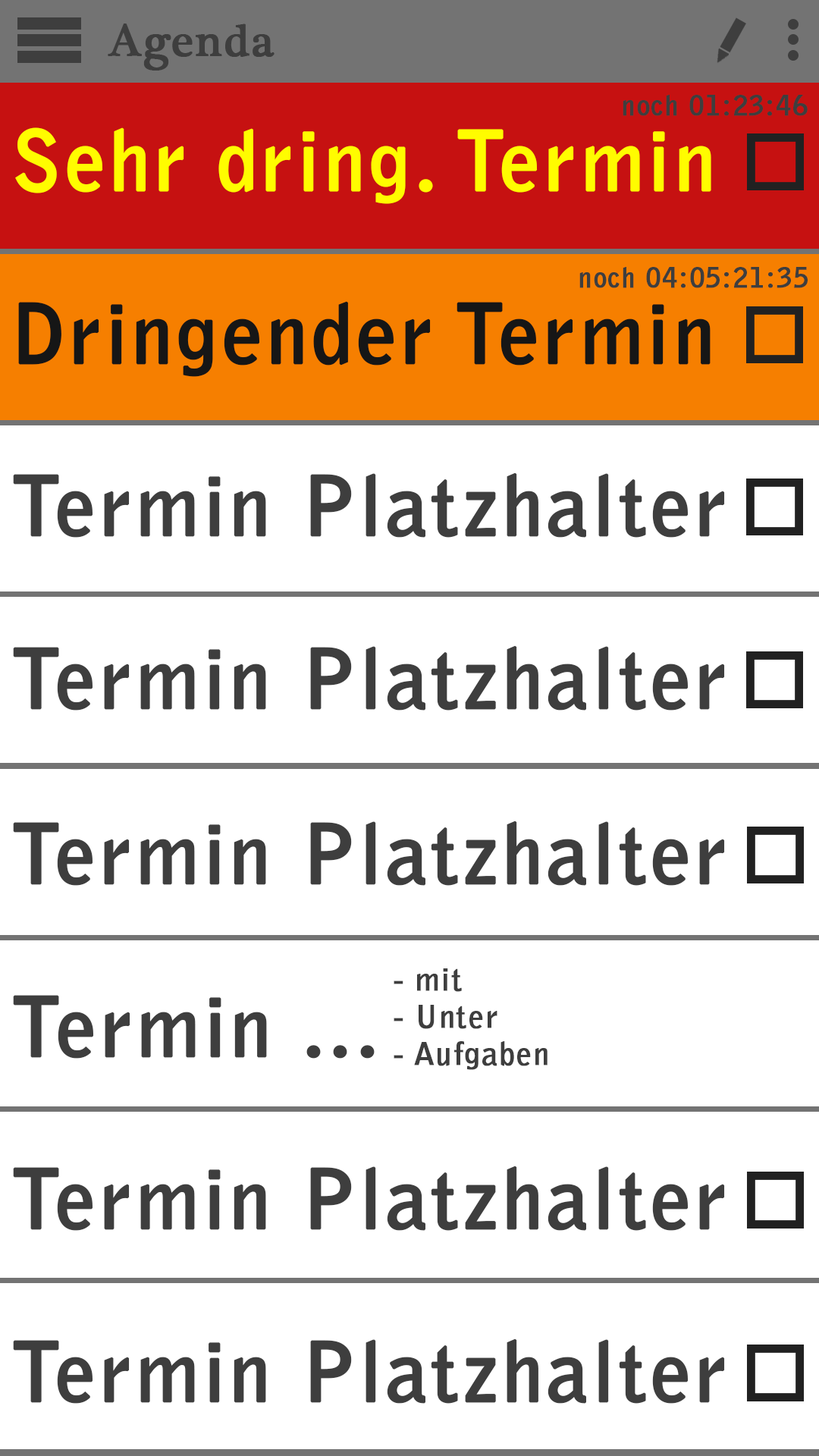
<style>
.page{position:relative;width:819px;height:1456px;background:#ffffff}
.page>*{position:absolute;margin:0}
.t1{font:45.5px "PlantagenetCherokee";letter-spacing:0.025em;color:#3e3e3e;font-weight:bold}
.t2{font:27.3px "BellGothicStd-Bold";letter-spacing:0.025em;color:#3e3e3e;font-weight:bold}
.t3{font:81.1px "BellGothicStd-Bold";letter-spacing:0.025em;color:#fffc00;font-weight:bold}
.t4{font:81.1px "BellGothicStd-Bold";letter-spacing:0.025em;color:#161616;font-weight:bold}
.t5{font:81.1px "BellGothicStd-Bold";letter-spacing:0.025em;color:#3e3e3e;font-weight:bold}
.t6{font:31.1px "BellGothicStd-Bold";letter-spacing:0.025em;color:#3e3e3e;font-weight:bold}
</style>
<div class="page">
<p class="t1" style="left:108px;top:24px;width:167px;height:47px">Agenda</p>
<p class="t2" style="left:623px;top:95px;width:185px;height:21px">noch 01:23:46</p>
<p class="t3" style="left:15px;top:127px;width:696px;height:77px">Sehr dring. Termin</p>
<p class="t2" style="left:579px;top:267px;width:229px;height:21px">noch 04:05:21:35</p>
<p class="t4" style="left:18px;top:301px;width:693px;height:76px">Dringender Termin</p>
<p class="t5" style="left:13px;top:472px;width:712px;height:66px">Termin Platzhalter</p>
<p class="t5" style="left:13px;top:645px;width:712px;height:66px">Termin Platzhalter</p>
<p class="t5" style="left:13px;top:821px;width:712px;height:65px">Termin Platzhalter</p>
<p class="t6" style="left:394px;top:968px;width:154px;height:102px">- mit<br>- Unter<br>- Aufgaben</p>
<p class="t5" style="left:13px;top:995px;width:362px;height:64px">Termin ...</p>
<p class="t5" style="left:13px;top:1166px;width:712px;height:65px">Termin Platzhalter</p>
<p class="t5" style="left:13px;top:1338px;width:712px;height:66px">Termin Platzhalter</p>
</div>
